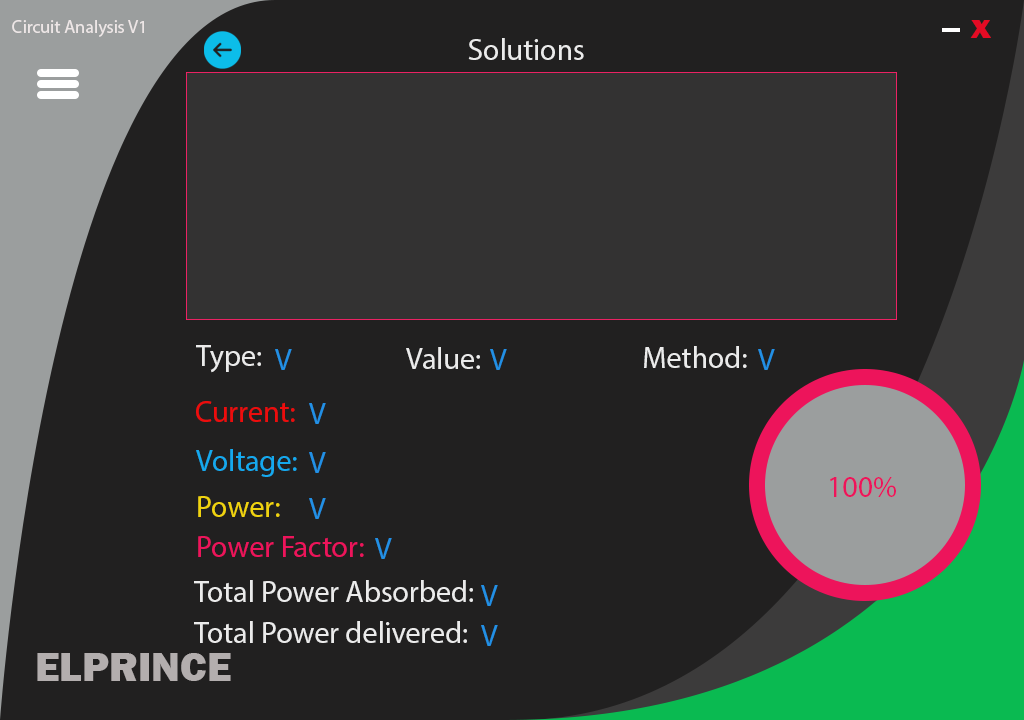
<style>
.page{position:relative;width:1024px;height:720px;background:#212020}
.page>*{position:absolute;margin:0}
.t1{font:18px "MyriadPro-Regular";color:#ede6e6}
.t2{font:35.7px "FranklinGothic-Heavy";color:#e40b24}
.t3{font:30px "MyriadPro-Regular";color:#ebebeb}
.t4{font:30px "MyriadPro-Regular";color:#2290e5}
.t5{font:30px "MyriadPro-Regular";color:#ed0c0c}
.t6{font:30px "MyriadPro-Regular";color:#15a9ee}
.t7{font:30px "MyriadPro-Regular";color:#ed145b}
.t8{font:30px "MyriadPro-Regular";color:#f0d30f}
.t9{font:42px "FranklinGothic-Heavy";color:#b3aeae}
</style>
<div class="page">
<p class="t1" style="left:12px;top:20px;width:132px;height:17px">Circuit Analysis V1</p>
<p class="t2" style="left:970px;top:20px;width:21px;height:18px">x</p>
<p class="t3" style="left:468px;top:38px;width:116px;height:22px">Solutions</p>
<p class="t3" style="left:196px;top:345px;width:65px;height:28px">Type:</p>
<p class="t4" style="left:275px;top:349px;width:17px;height:21px">V</p>
<p class="t3" style="left:406px;top:347px;width:74px;height:22px">Value:</p>
<p class="t4" style="left:490px;top:349px;width:17px;height:21px">V</p>
<p class="t3" style="left:644px;top:346px;width:103px;height:22px">Method:</p>
<p class="t4" style="left:758px;top:349px;width:17px;height:21px">V</p>
<p class="t5" style="left:196px;top:401px;width:99px;height:21px">Current:</p>
<p class="t4" style="left:309px;top:403px;width:17px;height:21px">V</p>
<p class="t6" style="left:196px;top:449px;width:101px;height:28px">Voltage:</p>
<p class="t4" style="left:309px;top:452px;width:17px;height:21px">V</p>
<p class="t7" style="left:830px;top:477px;width:66px;height:20px">100%</p>
<p class="t8" style="left:198px;top:496px;width:82px;height:21px">Power:</p>
<p class="t4" style="left:309px;top:498px;width:17px;height:21px">V</p>
<p class="t7" style="left:198px;top:536px;width:166px;height:21px">Power Factor:</p>
<p class="t4" style="left:375px;top:538px;width:17px;height:21px">V</p>
<p class="t3" style="left:194px;top:580px;width:279px;height:22px">Total Power Absorbed:</p>
<p class="t4" style="left:481px;top:585px;width:17px;height:21px">V</p>
<p class="t3" style="left:194px;top:621px;width:273px;height:22px">Total Power delivered:</p>
<p class="t4" style="left:481px;top:625px;width:17px;height:21px">V</p>
<p class="t9" style="left:37px;top:653px;width:194px;height:28px">ELPRINCE</p>
</div>
